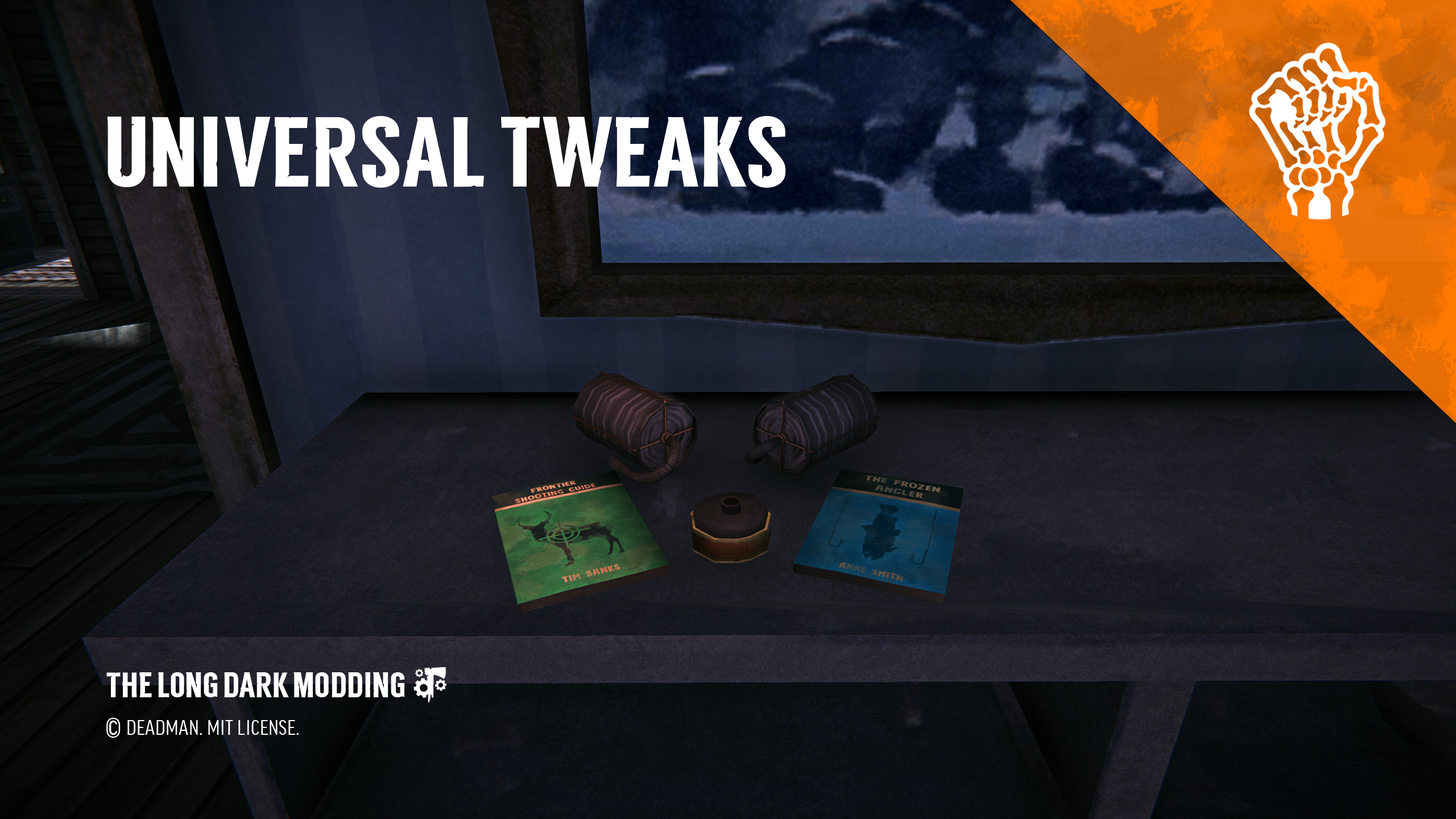
<style>
.page{position:relative;width:1456px;height:819px}
.page>*{position:absolute;margin:0}
.t1{font:99.5px "TLD_Headline_One_Test1.5";letter-spacing:0.01em;color:#ffffff}
.t2{font:35.3px "TLD_Headline_One_Test1.5";letter-spacing:0.004em;color:#ffffff}
.t3{font:27.3px "FFGoodProCond-News";letter-spacing:0.015em;color:#ffffff}
.t4{font:20.5px "FFGoodProCond-News";letter-spacing:0.015em;color:#ffffff}
</style>
<div class="page">
<p class="t1" style="left:107px;top:116px;width:679px;height:72px">UNIVERSAL TWEAKS</p>
<p class="t2" style="left:106px;top:672px;width:299px;height:25px">THE LONG DARK MODDING</p>
<p class="t3" style="left:106px;top:718px;width:15px;height:20px">©</p>
<p class="t4" style="left:127px;top:720px;width:172px;height:15px">DEADMAN. MIT LICENSE.</p>
</div>
